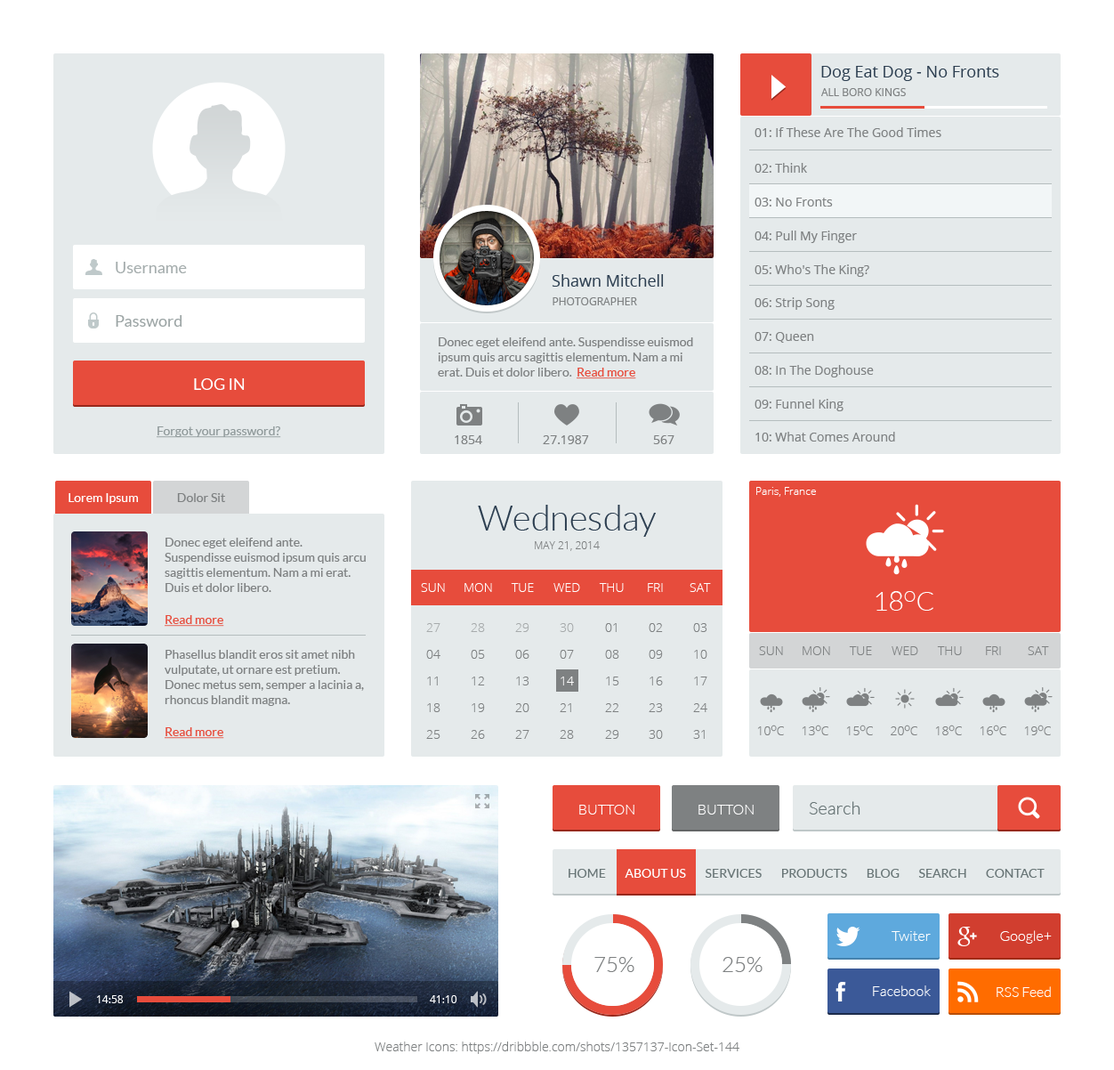
<style>
.page{position:relative;width:1114px;height:1070px;background:#ffffff}
.page>*{position:absolute;margin:0}
.t1{font:16px "OpenSans";color:#2c3e50}
.t2{font:10.7px "OpenSans";color:#7e8182;text-transform:uppercase}
.t3{font:12.5px "OpenSans";color:#7e8182}
.t4{font:16px "Lato-Regular";color:#a5adad}
.t5{font:16px "Lato-Regular";color:#9ca5a5}
.t6{font:12.5px "Lato-Regular";color:#7e8182}
.t7{font:12.5px "Lato-Regular";color:#e74c3c;text-decoration:underline}
.t8{font:16px "Lato-Regular";color:#ffffff;text-transform:uppercase}
.t9{font:12.5px "Lato-Regular";color:#909a9b;text-decoration:underline}
.t10{font:12.5px "OpenSans";color:#7e8182;text-transform:uppercase}
.t11{font:12.5px "Lato-Regular";color:#ffffff}
.t12{font:10.7px "OpenSans-Light";color:#ffffff}
.t13{font:35.6px "Lato-Light";color:#2c3e50}
.t14{font:10.7px "OpenSans-Light";color:#7e8182;text-transform:uppercase}
.t15{font:12.5px "OpenSans-Light";color:#ffffff;text-transform:uppercase}
.t16{font:26.7px "Lato-Light";color:#ffffff}
.t17{font:12.5px "OpenSans-Light";color:#a7abac;text-transform:uppercase}
.t18{font:12.5px "OpenSans-Light";color:#7e8182;text-transform:uppercase}
.t19{font:12.5px "OpenSans-Light";text-transform:uppercase}
.t20{font:14.2px "Lato-Light";color:#ffffff;text-transform:uppercase}
.t21{font:17.8px "Lato-Light";color:#697677}
.t22{font:12.5px "Lato-Regular";color:#697677;text-transform:uppercase}
.t23{font:12.5px "Lato-Regular";color:#ffffff;text-transform:uppercase}
.t24{font:14.2px "Lato-Light";color:#ffffff}
.t25{font:21.4px "Lato-Light";color:#7e8182;text-transform:uppercase}
.t26{font:10.7px "OpenSans";color:#ffffff;text-transform:uppercase}
.t27{font:12.5px "OpenSans-Light";color:#7e8182}
</style>
<div class="page">
<p class="t1" style="left:822px;top:66px;width:178px;height:15px">Dog Eat Dog - No Fronts</p>
<p class="t2" style="left:822px;top:88px;width:84px;height:8px">All Boro Kings</p>
<p class="t3" style="left:755px;top:127px;width:187px;height:10px">01: If These Are The Good Times</p>
<p class="t3" style="left:755px;top:163px;width:52px;height:10px">02: Think</p>
<p class="t3" style="left:755px;top:198px;width:78px;height:9px">03: No Fronts</p>
<p class="t3" style="left:755px;top:231px;width:102px;height:12px">04: Pull My Finger</p>
<p class="t4" style="left:116px;top:262px;width:71px;height:11px">Username</p>
<p class="t3" style="left:755px;top:264px;width:115px;height:13px">05: Who's The King?</p>
<p class="t1" style="left:552px;top:274px;width:112px;height:13px">Shawn Mitchell</p>
<p class="t2" style="left:553px;top:297px;width:84px;height:8px">Photographer</p>
<p class="t3" style="left:755px;top:297px;width:80px;height:13px">06: Strip Song</p>
<p class="t5" style="left:116px;top:315px;width:66px;height:12px">Password</p>
<p class="t6" style="left:438px;top:337px;width:255px;height:42px">Donec eget eleifend ante. Suspendisse euismod ipsum quis arcu sagittis elementum. Nam a mi erat. Duis et dolor libero.  <span class="t7">Read more</span></p>
<p class="t3" style="left:755px;top:332px;width:59px;height:11px">07: Queen</p>
<p class="t3" style="left:755px;top:365px;width:119px;height:12px">08: In The Doghouse</p>
<p class="t8" style="left:194px;top:378px;width:51px;height:12px">Log in</p>
<p class="t3" style="left:755px;top:399px;width:89px;height:12px">09: Funnel King</p>
<p class="t9" style="left:157px;top:426px;width:124px;height:12px">Forgot your password?</p>
<p class="t10" style="left:455px;top:435px;width:27px;height:9px">1854</p>
<p class="t10" style="left:543px;top:435px;width:46px;height:9px">27.1987</p>
<p class="t10" style="left:653px;top:435px;width:22px;height:9px">567</p>
<p class="t3" style="left:756px;top:432px;width:139px;height:10px">10: What Comes Around</p>
<p class="t11" style="left:69px;top:493px;width:69px;height:11px">Lorem Ipsum</p>
<p class="t6" style="left:177px;top:493px;width:48px;height:9px">Dolor Sit</p>
<p class="t12" style="left:757px;top:487px;width:59px;height:10px">Paris, France</p>
<p class="t13" style="left:478px;top:505px;width:178px;height:32px">Wednesday</p>
<p class="t6" style="left:165px;top:538px;width:201px;height:54px">Donec eget eleifend ante. Suspendisse euismod ipsum quis arcu sagittis elementum. Nam a mi erat. Duis et dolor libero.</p>
<p class="t14" style="left:535px;top:541px;width:65px;height:10px">May 21, 2014</p>
<p class="t15" style="left:421px;top:583px;width:24px;height:9px">Sun</p>
<p class="t15" style="left:465px;top:583px;width:27px;height:9px">Mon</p>
<p class="t15" style="left:511px;top:583px;width:23px;height:9px">Tue</p>
<p class="t15" style="left:554px;top:583px;width:26px;height:9px">WEd</p>
<p class="t15" style="left:599px;top:583px;width:25px;height:9px">Thu</p>
<p class="t15" style="left:648px;top:583px;width:15px;height:9px">Fri</p>
<p class="t15" style="left:690px;top:583px;width:21px;height:9px">Sat</p>
<p class="t16" style="left:876px;top:591px;width:58px;height:20px">18OC</p>
<p class="t7" style="left:165px;top:615px;width:59px;height:12px">Read more</p>
<p class="t17" style="left:426px;top:623px;width:15px;height:9px">27</p>
<p class="t17" style="left:471px;top:623px;width:14px;height:9px">28</p>
<p class="t17" style="left:515px;top:623px;width:15px;height:9px">29</p>
<p class="t17" style="left:560px;top:623px;width:14px;height:9px">30</p>
<p class="t18" style="left:605px;top:623px;width:12px;height:9px">01</p>
<p class="t18" style="left:649px;top:623px;width:14px;height:9px">02</p>
<p class="t18" style="left:693px;top:623px;width:15px;height:9px">03</p>
<p class="t6" style="left:165px;top:650px;width:199px;height:56px">Phasellus blandit eros sit amet nibh vulputate, ut ornare est pretium. Donec metus sem, semper a lacinia a, rhoncus blandit magna.</p>
<p class="t18" style="left:426px;top:650px;width:15px;height:9px">04</p>
<p class="t18" style="left:471px;top:650px;width:14px;height:9px">05</p>
<p class="t18" style="left:515px;top:650px;width:15px;height:9px">06</p>
<p class="t18" style="left:560px;top:650px;width:14px;height:9px">07</p>
<p class="t18" style="left:605px;top:650px;width:15px;height:9px">08</p>
<p class="t18" style="left:649px;top:650px;width:14px;height:9px">09</p>
<p class="t18" style="left:694px;top:650px;width:14px;height:9px">10</p>
<p class="t18" style="left:759px;top:646px;width:24px;height:9px">Sun</p>
<p class="t18" style="left:803px;top:646px;width:28px;height:9px">Mon</p>
<p class="t18" style="left:849px;top:646px;width:23px;height:9px">Tue</p>
<p class="t18" style="left:892px;top:646px;width:27px;height:9px">WEd</p>
<p class="t18" style="left:937px;top:646px;width:25px;height:9px">Thu</p>
<p class="t18" style="left:986px;top:646px;width:15px;height:9px">Fri</p>
<p class="t18" style="left:1028px;top:646px;width:21px;height:9px">Sat</p>
<p class="t19" style="left:427px;top:677px;width:11px;height:8px">11</p>
<p class="t18" style="left:472px;top:677px;width:13px;height:8px">12</p>
<p class="t18" style="left:516px;top:677px;width:14px;height:8px">13</p>
<p class="t15" style="left:561px;top:677px;width:13px;height:8px">14</p>
<p class="t18" style="left:606px;top:677px;width:14px;height:8px">15</p>
<p class="t18" style="left:650px;top:677px;width:13px;height:8px">16</p>
<p class="t18" style="left:694px;top:677px;width:14px;height:8px">17</p>
<p class="t18" style="left:427px;top:703px;width:14px;height:9px">18</p>
<p class="t18" style="left:472px;top:703px;width:13px;height:9px">19</p>
<p class="t18" style="left:515px;top:703px;width:15px;height:9px">20</p>
<p class="t18" style="left:560px;top:703px;width:11px;height:9px">21</p>
<p class="t18" style="left:605px;top:703px;width:15px;height:9px">22</p>
<p class="t18" style="left:649px;top:703px;width:14px;height:9px">23</p>
<p class="t18" style="left:693px;top:703px;width:15px;height:9px">24</p>
<p class="t18" style="left:758px;top:725px;width:26px;height:10px">10oc</p>
<p class="t18" style="left:802px;top:725px;width:27px;height:10px">13oc</p>
<p class="t18" style="left:847px;top:725px;width:26px;height:10px">15oc</p>
<p class="t18" style="left:891px;top:725px;width:27px;height:10px">20oc</p>
<p class="t18" style="left:936px;top:725px;width:26px;height:10px">18oc</p>
<p class="t18" style="left:980px;top:725px;width:27px;height:10px">16oc</p>
<p class="t18" style="left:1025px;top:725px;width:26px;height:10px">19oc</p>
<p class="t7" style="left:165px;top:727px;width:59px;height:12px">Read more</p>
<p class="t18" style="left:426px;top:730px;width:15px;height:9px">25</p>
<p class="t18" style="left:471px;top:730px;width:14px;height:9px">26</p>
<p class="t18" style="left:515px;top:730px;width:15px;height:9px">27</p>
<p class="t18" style="left:560px;top:730px;width:14px;height:9px">28</p>
<p class="t18" style="left:605px;top:730px;width:15px;height:9px">29</p>
<p class="t18" style="left:649px;top:730px;width:14px;height:9px">30</p>
<p class="t18" style="left:693px;top:730px;width:12px;height:9px">31</p>
<p class="t20" style="left:579px;top:805px;width:56px;height:9px">Button</p>
<p class="t20" style="left:699px;top:805px;width:55px;height:9px">Button</p>
<p class="t21" style="left:809px;top:801px;width:52px;height:13px">Search</p>
<p class="t22" style="left:569px;top:869px;width:476px;height:9px">Home    <span class="t23">    About Us </span>       Services        Products        Blog        Search        Contact</p>
<p class="t24" style="left:892px;top:931px;width:39px;height:10px">Twiter</p>
<p class="t24" style="left:1001px;top:930px;width:51px;height:14px">Google+</p>
<p class="t25" style="left:595px;top:957px;width:40px;height:15px">75%</p>
<p class="t25" style="left:723px;top:957px;width:40px;height:15px">25%</p>
<p class="t24" style="left:873px;top:985px;width:58px;height:11px">Facebook</p>
<p class="t24" style="left:997px;top:986px;width:54px;height:11px">RSS Feed</p>
<p class="t26" style="left:97px;top:995px;width:27px;height:8px">14:58</p>
<p class="t26" style="left:430px;top:995px;width:28px;height:8px">41:10</p>
<p class="t27" style="left:375px;top:1041px;width:365px;height:13px">Weather Icons: https://dribbble.com/shots/1357137-Icon-Set-144</p>
</div>
